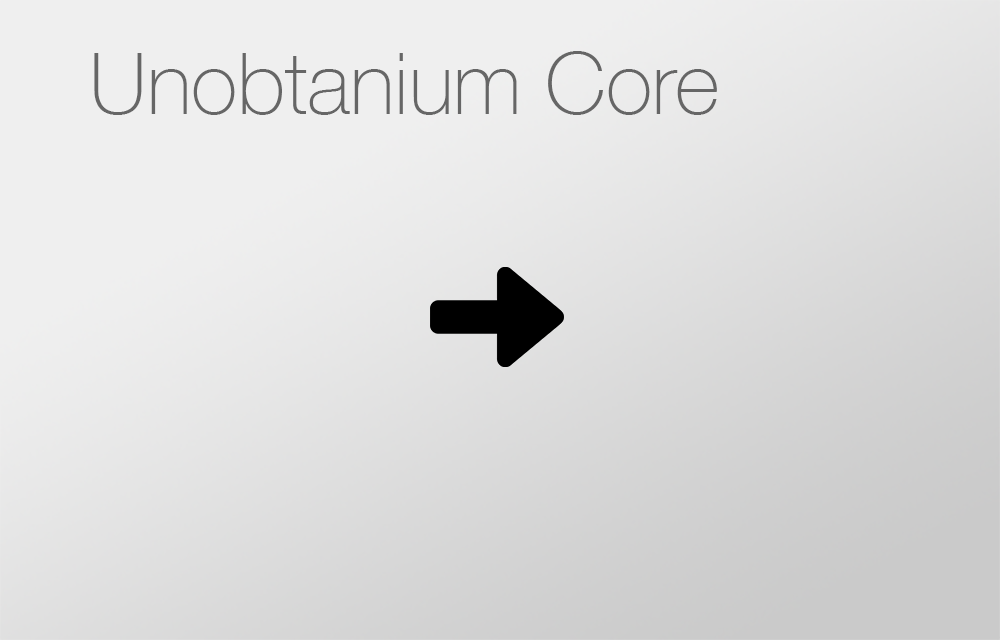
<style>
.page{position:relative;width:1000px;height:640px}
.page>*{position:absolute;margin:0}
.t1{font:85.7px "HelveticaNeue-Thin";color:#666666}
</style>
<div class="page">
<p class="t1" style="left:94px;top:51px;width:623px;height:64px">Unobtanium Core</p>
</div>
